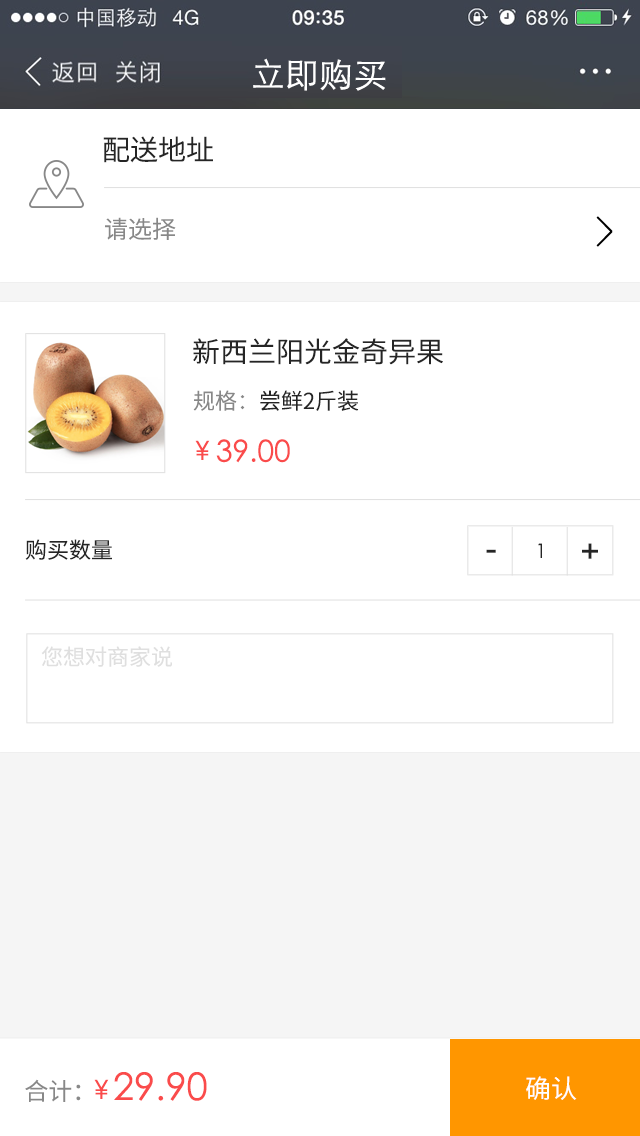
<style>
.page{position:relative;width:640px;height:1136px;background:#ffffff}
.page>*{position:absolute;margin:0}
.t1{font:34px "STXihei";color:#ffffff}
.t2{font:28px "SourceHanSansCN-Normal";color:#252525}
.t3{font:24px "SourceHanSansCN-Normal";color:#888888}
.t4{font:22px "SourceHanSansCN-Normal";color:#252525}
.t5{font:22px "SourceHanSansCN-Normal";color:#888888}
.t6{font:45px "STXihei";color:#fa4b4b}
.t7{font:30px "STXihei";color:#fa4b4b}
.t8{font:20px "STXihei";color:#252525}
.t9{font:36px "DFPHeiW7";color:#252525}
.t10{font:22px "SourceHanSansCN-Normal";color:#dfdfdf}
.t11{font:38px "STXihei";color:#fa4b4b}
.t12{font:26px "SourceHanSansCN-Regular";color:#ffffff}
</style>
<div class="page">
<p class="t1" style="left:253px;top:58px;width:133px;height:33px">立即购买</p>
<p class="t2" style="left:103px;top:136px;width:110px;height:27px">配送地址</p>
<p class="t3" style="left:105px;top:217px;width:71px;height:23px">请选择</p>
<p class="t2" style="left:193px;top:338px;width:250px;height:27px">新西兰阳光金奇异果</p>
<p class="t4" style="left:193px;top:390px;width:166px;height:21px"><span class="t5">规格：</span>尝鲜2斤装</p>
<p class="t6" style="left:195px;top:440px;width:15px;height:20px">¥</p>
<p class="t7" style="left:216px;top:439px;width:74px;height:24px">39.00</p>
<p class="t4" style="left:25px;top:539px;width:87px;height:21px">购买数量</p>
<p class="t8" style="left:538px;top:543px;width:4px;height:15px">1</p>
<p class="t9" style="left:582px;top:543px;width:16px;height:16px">+</p>
<p class="t9" style="left:486px;top:549px;width:10px;height:4px">-</p>
<p class="t10" style="left:41px;top:646px;width:131px;height:21px">您想对商家说</p>
<p class="t11" style="left:25px;top:1072px;width:182px;height:30px"><span class="t3">合计：   </span>29.90</p>
<p class="t6" style="left:94px;top:1079px;width:15px;height:20px">¥</p>
<p class="t12" style="left:526px;top:1076px;width:51px;height:24px">确认</p>
</div>
